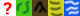
<style>
.page{position:relative;width:80px;height:16px}
.page>*{position:absolute;margin:0}
.t1{font:16.7px "Roboto-Bold";color:#ff0000}
</style>
<div class="page">
<p class="t1" style="left:3px;top:2px;width:9px;height:13px">?</p>
</div>
